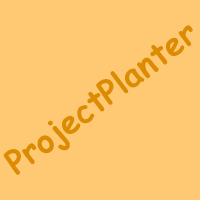
<style>
.page{position:relative;width:200px;height:200px;background:#ffc973}
.page>*{position:absolute;margin:0}
.t1{font:33.3px "ComicSansMS-Bold";color:#dc8c00}
</style>
<div class="page">
<p class="t1" style="left:3px;top:25px;width:190px;height:150px;rotate:-37deg">ProjectPlanter</p>
</div>
